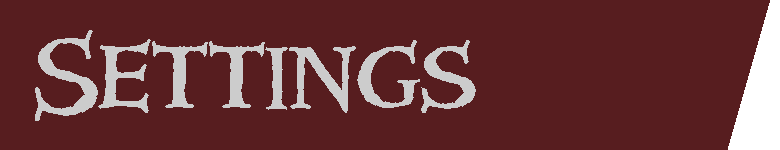
<style>
.page{position:relative;width:780px;height:150px;background:#571d1f}
.page>*{position:absolute;margin:0}
.t1{font:100px "Windlass";color:#cccccc}
</style>
<div class="page">
<p class="t1" style="left:35px;top:30px;width:441px;height:91px">Settings</p>
</div>
